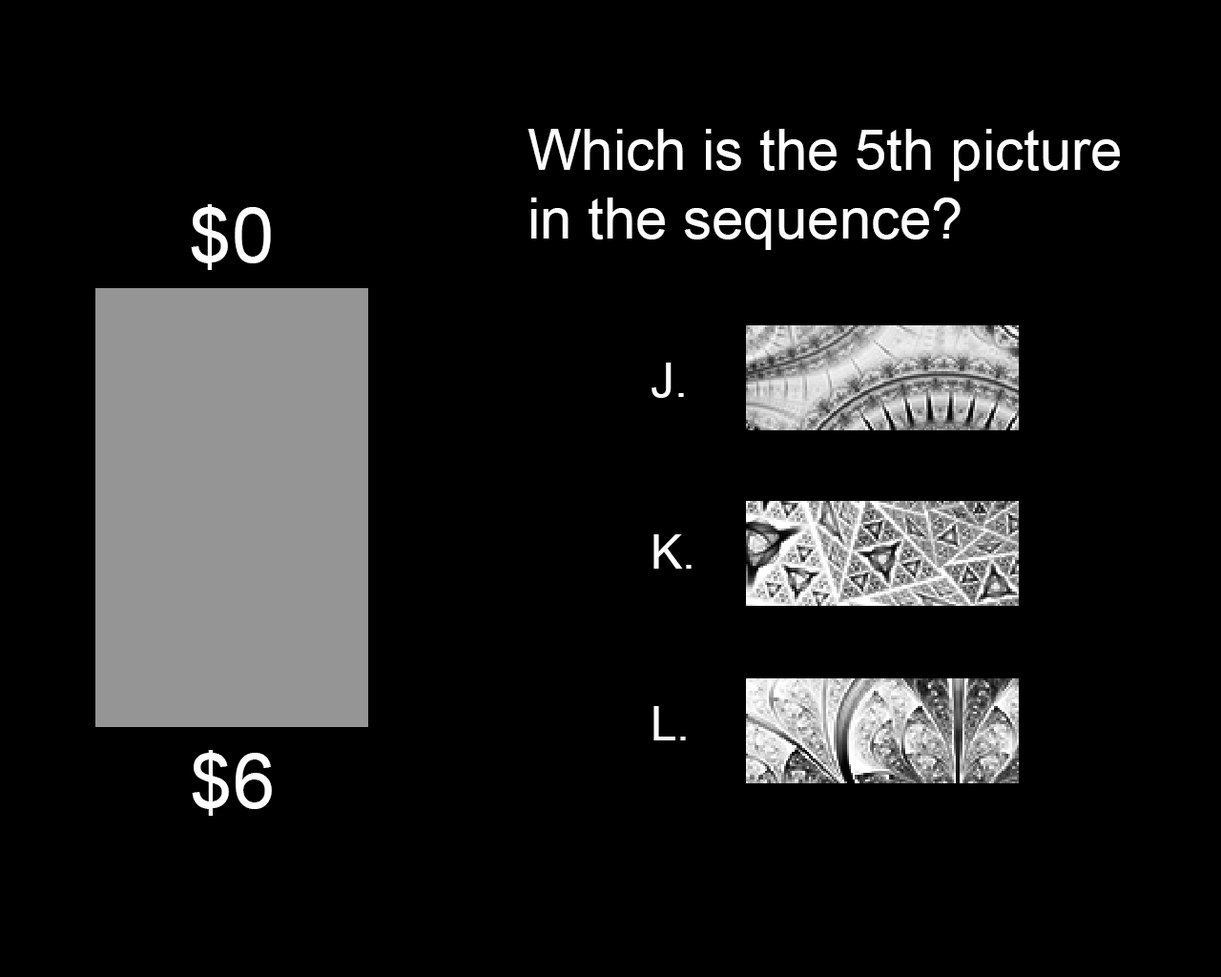
<style>
.page{position:relative;width:1221px;height:977px;background:#000000}
.page>*{position:absolute;margin:0}
.t1{font:57.2px "ArialMT";color:#fefefe}
.t2{font:47.7px "ArialMT";color:#fefefe}
</style>
<div class="page">
<p class="t1" style="left:527px;top:129px;width:593px;height:121px">Which is the 5th picture in the sequence?</p>
<p class="t2" style="left:651px;top:362px;width:41px;height:378px">J.<br><br><br>K.<br><br><br>L.</p>
</div>
